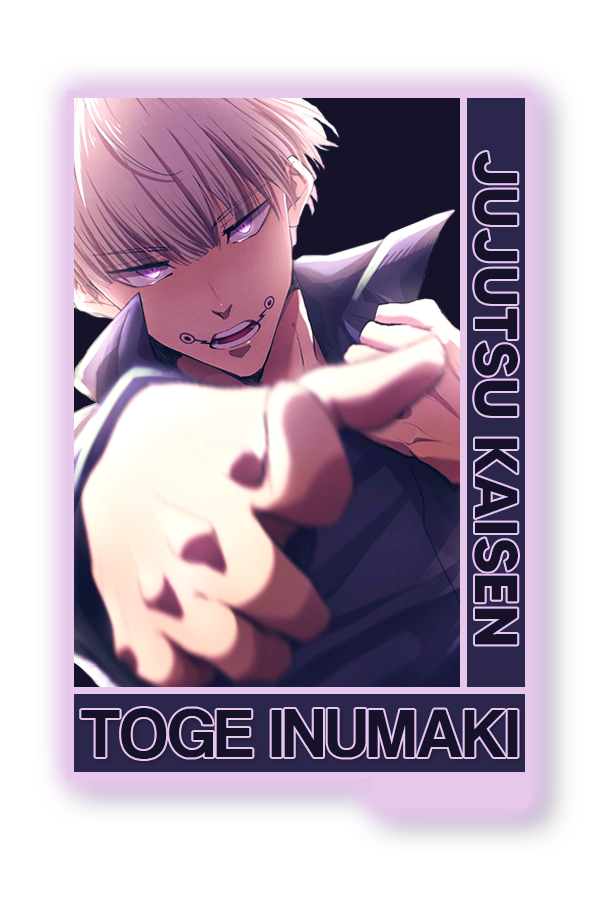
<style>
.page{position:relative;width:600px;height:900px;background:#ffffff}
.page>*{position:absolute;margin:0}
.t1{font:60.3px "MADETOMMY-Bold";color:#19151e}
.t2{font:71.3px "CoolveticaRg-Regular";color:#19151e}
</style>
<div class="page">
<p class="t1" style="left:474px;top:152px;width:44px;height:493px;rotate:90deg">JUJUTSU KAISEN</p>
<p class="t2" style="left:81px;top:708px;width:437px;height:51px">TOGE INUMAKI</p>
</div>
